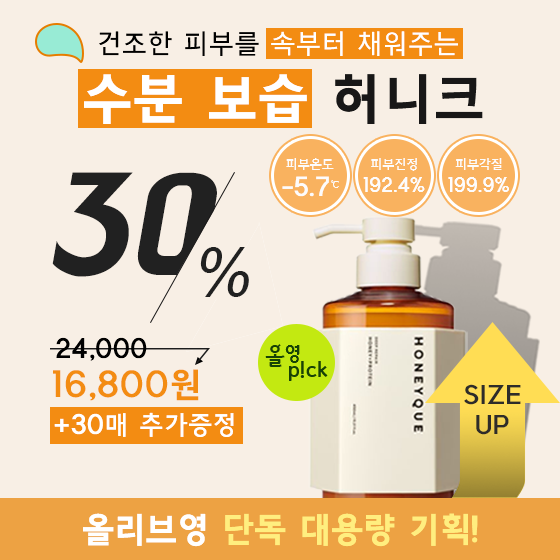
<style>
.page{position:relative;width:560px;height:560px;background:#f8efe5}
.page>*{position:absolute;margin:0}
.t1{font:26px/65px "THEJung140";letter-spacing:0.018em;color:#ffffff}
.t2{font:26px/65px "THEJung140";letter-spacing:0.018em;color:#000000}
.t3{font:53px/65px "THEJung170";letter-spacing:0.018em;color:#ffffff}
.t4{font:53px/65px "THEJung170";letter-spacing:0.018em;color:#181717}
.t5{font:12.8px "THEJung150";color:#fdfcfc}
.t6{font:140.5px "BMHANNA11yrsold";color:#212121;font-style:italic}
.t7{font:24.2px "THEJung170";letter-spacing:-0.005em;color:#fdfcfc}
.t8{font:9.7px "THEJung170";letter-spacing:-0.005em;color:#fdfcfc}
.t9{font:18.5px "THEJung170";letter-spacing:-0.005em;color:#fdfcfc}
.t10{font:67.4px "ArialMT";color:#212121;font-style:italic}
.t11{font:25px "THEJung170";letter-spacing:0.02em;color:#000000}
.t12{font:20.7px "BinggraeTaom-Bold";letter-spacing:0.005em;color:#174306}
.t13{font:21.7px "BinggraeTaom-Bold";letter-spacing:-0.01em;color:#174306;scale:0.95 1}
.t14{font:18.2px "BinggraeTaom-Bold";letter-spacing:-0.01em;color:#174306}
.t15{font:33.2px "THEJung170";letter-spacing:0.02em;color:#f38c12;scale:1.05 1}
.t16{font:23.8px "THEJung170";letter-spacing:0.02em;color:#2e2c2a;scale:1.05 1}
.t17{font:25px "THEJung150";letter-spacing:0.018em;color:#ffffff}
.t18{font:25px "THEJung170";letter-spacing:0.018em;color:#ffffff}
.t19{font:34px "THEJung170";letter-spacing:-0.01em;color:#ffee7f}
.t20{font:34px "THEJung170";letter-spacing:-0.01em;color:#ffffff}
</style>
<div class="page">
<p class="t1" style="left:84px;top:31px;width:399px;height:93px;text-align:center"><span class="t2">건조한 피부를 </span>속부터 채워주는 <br><span class="t3">수분 보습 </span><span class="t4">허니크</span></p>
<p class="t5" style="left:286px;top:158px;width:48px;height:12px">피부온도</p>
<p class="t5" style="left:371px;top:158px;width:46px;height:13px">피부진정</p>
<p class="t5" style="left:455px;top:158px;width:47px;height:12px">피부각질</p>
<p class="t6" style="left:52px;top:172px;width:165px;height:105px">30</p>
<p class="t7" style="left:282px;top:176px;width:57px;height:21px">-5.7<span class="t8">℃</span></p>
<p class="t9" style="left:363px;top:177px;width:62px;height:15px">192.4%</p>
<p class="t9" style="left:448px;top:177px;width:61px;height:15px">199.9%</p>
<p class="t10" style="left:200px;top:247px;width:49px;height:50px">%</p>
<p class="t11" style="left:56px;top:337px;width:91px;height:24px">24,000</p>
<p class="t12" style="left:265px;top:344px;width:63px;height:37px;text-align:center"><span class="t13">올</span><span class="t14">영<br>       </span>p!ck</p>
<p class="t15" style="left:53px;top:369px;width:146px;height:32px">16,800원</p>
<p class="t16" style="left:464px;top:384px;width:57px;height:51px;text-align:center">SIZE<br>UP</p>
<p class="t17" style="left:54px;top:412px;width:180px;height:25px"><span class="t18">+30</span>매 추가증정</p>
<p class="t19" style="left:83px;top:513px;width:395px;height:34px"><span class="t20">올리브영 </span>단독 대용량 기획!</p>
</div>
